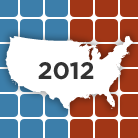
<style>
.page{position:relative;width:138px;height:138px;background:#ffffff}
.page>*{position:absolute;margin:0}
.t1{font:112.5px "StateFace-Regular";letter-spacing:0.01em;color:#ffffff}
.t2{font:24px "Gotham-Bold";color:#333333}
</style>
<div class="page">
<p class="t1" style="left:5px;top:36px;width:128px;height:74px">z</p>
<p class="t2" style="left:38px;top:62px;width:56px;height:18px">2012</p>
</div>
